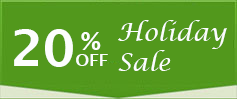
<style>
.page{position:relative;width:237px;height:99px;background:#52981c}
.page>*{position:absolute;margin:0}
.t1{font:25.1px "LucidaCalligraphy-Italic";color:#fcfdfd}
.t2{font:25.1px "LucidaSans-Demi";color:#fcfdfd}
</style>
<div class="page">
<p class="t1" style="left:118px;top:20px;width:109px;height:51px">Holiday<br>Sale</p>
<p class="t2" style="left:81px;top:32px;width:20px;height:18px">%</p>
</div>
